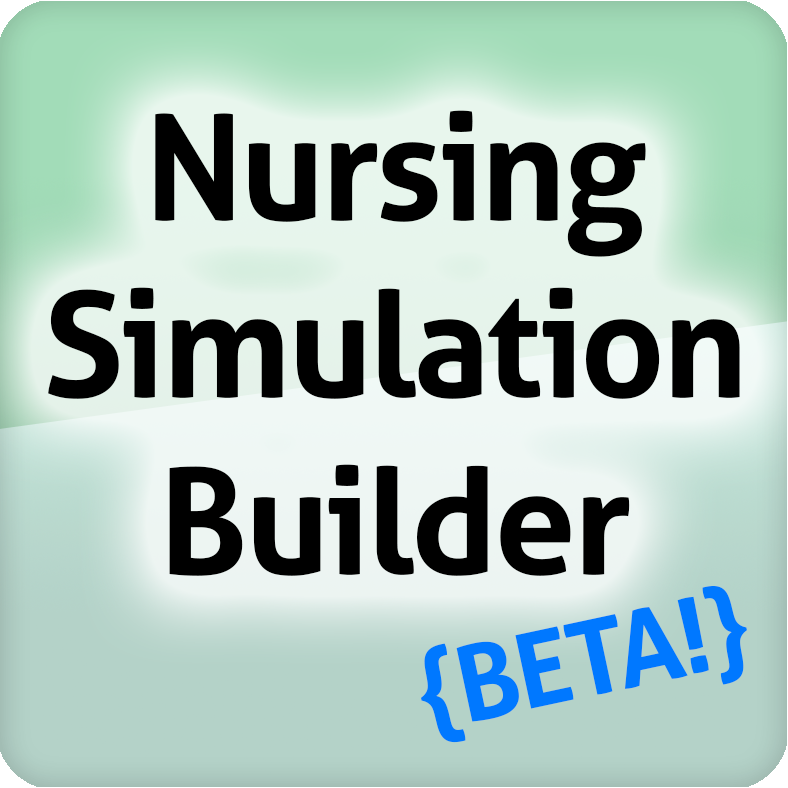
<style>
.page{position:relative;width:788px;height:788px}
.page>*{position:absolute;margin:0}
.t1{font:147.5px "Aller-Bold";letter-spacing:-0.025em;color:#000000}
.t2{font:104.1px "Aller-Bold";letter-spacing:-0.025em;color:#0078ff}
</style>
<div class="page">
<p class="t1" style="left:48px;top:110px;width:692px;height:466px;text-align:center">Nursing<br>Simulation<br>Builder</p>
<p class="t2" style="left:421px;top:586px;width:326px;height:157px;rotate:-12deg">{BETA!}</p>
</div>
